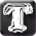
<style>
.page{position:relative;width:36px;height:36px}
.page>*{position:absolute;margin:0}
.t1{font:39.9px "CooperBlack";color:#ffffff}
</style>
<div class="page">
<p class="t1" style="left:4px;top:4px;width:28px;height:28px">T</p>
</div>
